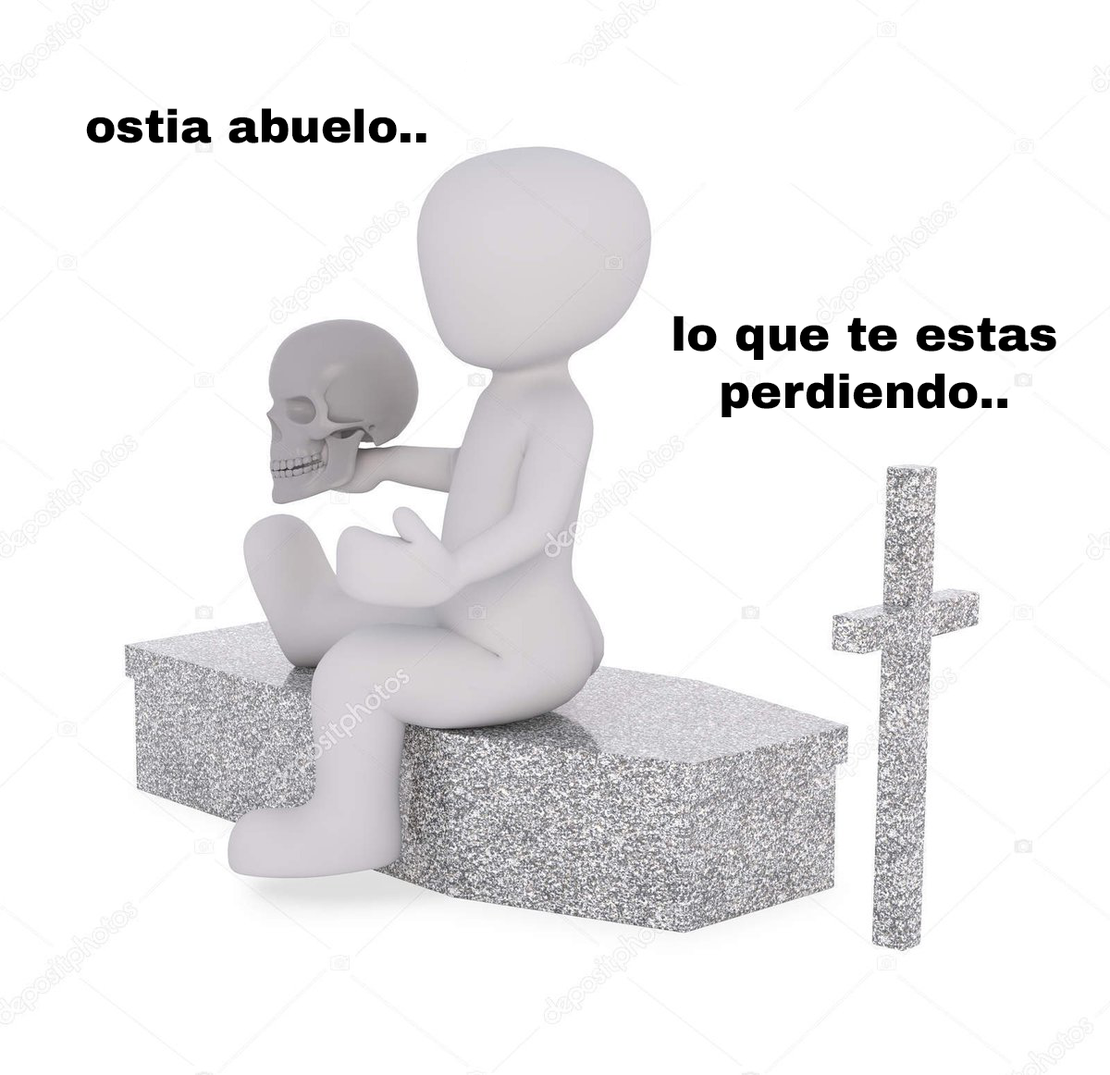
<style>
.page{position:relative;width:1110px;height:1075px;background:#ffffff}
.page>*{position:absolute;margin:0}
.t1{font:46.5px "ArchivoBlack-Regular";color:#000000}
.t2{font:47.7px "ArchivoBlack-Regular";color:#000000}
</style>
<div class="page">
<p class="t1" style="left:86px;top:108px;width:340px;height:35px">ostia abuelo..</p>
<p class="t2" style="left:673px;top:315px;width:383px;height:102px;text-align:center">lo que te estas<br>perdiendo..</p>
</div>
